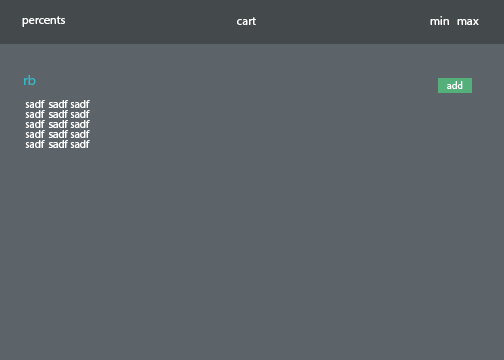
<style>
.page{position:relative;width:504px;height:360px;background:#5c6469}
.page>*{position:absolute;margin:0}
.t1{font:12px "MyriadPro-Regular";color:#ffffff}
.t2{font:14px "MyriadPro-Regular";color:#36b7c5}
.t3{font:10px "MyriadPro-Regular";color:#feffff}
.t4{font:11px "MyriadPro-Regular";color:#ffffff}
</style>
<div class="page">
<p class="t1" style="left:22px;top:16px;width:43px;height:11px">percents</p>
<p class="t1" style="left:237px;top:17px;width:19px;height:8px">cart</p>
<p class="t1" style="left:430px;top:16px;width:49px;height:9px">min   max</p>
<p class="t2" style="left:24px;top:75px;width:12px;height:10px">rb</p>
<p class="t3" style="left:447px;top:81px;width:16px;height:8px">add</p>
<p class="t4" style="left:25px;top:100px;width:65px;height:8px">sadf  sadf sadf</p>
<p class="t4" style="left:25px;top:110px;width:65px;height:8px">sadf  sadf sadf</p>
<p class="t4" style="left:25px;top:120px;width:65px;height:8px">sadf  sadf sadf</p>
<p class="t4" style="left:25px;top:130px;width:65px;height:8px">sadf  sadf sadf</p>
<p class="t4" style="left:25px;top:140px;width:65px;height:8px">sadf  sadf sadf</p>
</div>
